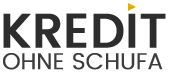
<style>
.page{position:relative;width:169px;height:73px;background:#ffffff}
.page>*{position:absolute;margin:0}
.t1{font:48px "Poppins-Medium";color:#2d2d2d;text-transform:uppercase;font-weight:bold}
.t2{font:23px "Poppins-Light";color:#3b3b3b;text-transform:uppercase;font-weight:bold}
</style>
<div class="page">
<p class="t1" style="left:3px;top:13px;width:163px;height:35px">Kredit</p>
<p class="t2" style="left:3px;top:53px;width:160px;height:17px">ohne Schufa</p>
</div>
